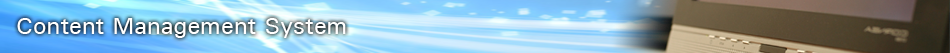
<style>
.page{position:relative;width:950px;height:53px}
.page>*{position:absolute;margin:0}
.t1{font:24px "UniversMedium";color:#ffffff}
</style>
<div class="page">
<p class="t1" style="left:17px;top:18px;width:329px;height:20px">Content Management System</p>
</div>
